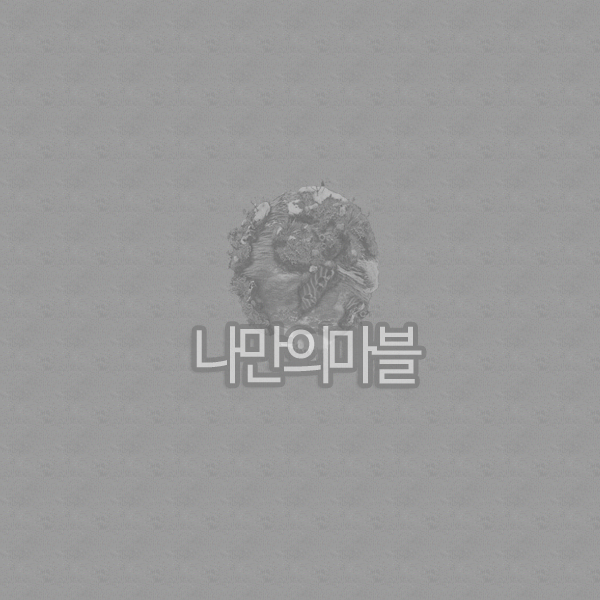
<style>
.page{position:relative;width:600px;height:600px;background:#9c9c9c}
.page>*{position:absolute;margin:0}
.t1{font:62.8px "NanumBarunGothic";letter-spacing:-0.115em;color:#cdcdcd;scale:0.91 1}
</style>
<div class="page">
<p class="t1" style="left:196px;top:326px;width:226px;height:58px">나만의마블</p>
</div>
